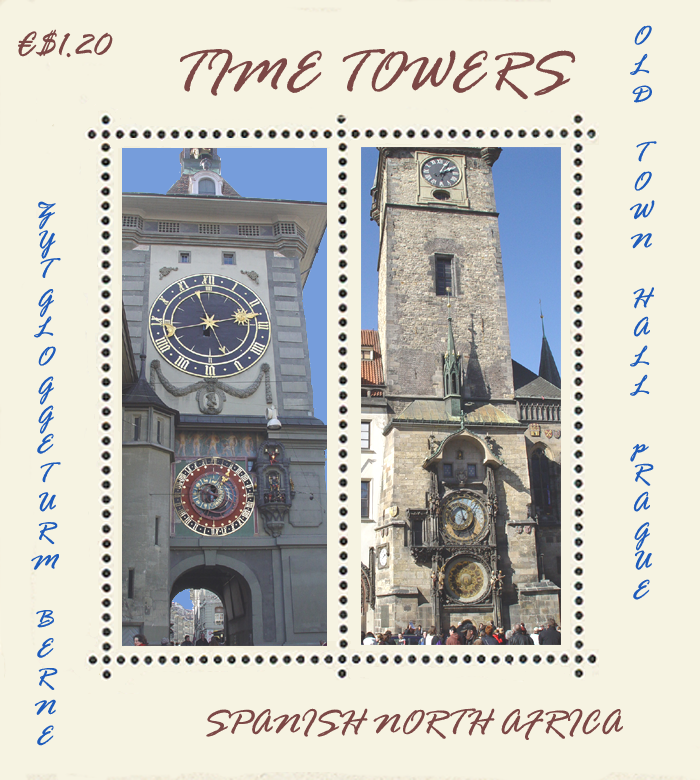
<style>
.page{position:relative;width:700px;height:780px;background:#f6f3e2}
.page>*{position:absolute;margin:0}
.t1{font:37.5px "RageItalic";color:#7c4846}
.t2{font:29.2px "RageItalic";color:#1f5cbc}
.t3{font:62.5px "RageItalic";color:#7c4846}
</style>
<div class="page">
<p class="t1" style="left:18px;top:29px;width:95px;height:29px">€$1.20</p>
<p class="t2" style="left:629px;top:25px;width:28px;height:575px">OLD TOWN HALL pRAGUE</p>
<p class="t3" style="left:180px;top:49px;width:396px;height:51px">TIME TOWERS</p>
<p class="t2" style="left:31px;top:201px;width:30px;height:545px">ZYTGLOGGETURM BERNE</p>
<p class="t1" style="left:206px;top:708px;width:417px;height:32px">SPANISH NORTH AFRICA</p>
</div>
